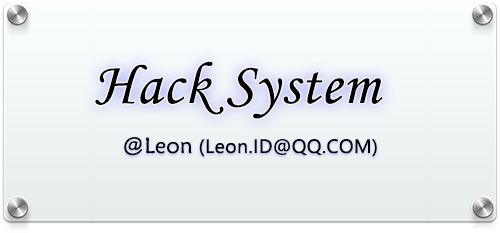
<style>
.page{position:relative;width:500px;height:233px}
.page>*{position:absolute;margin:0}
.t1{font:60px "MonotypeCorsiva";letter-spacing:0.02em;color:#000000}
.t2{font:18px "MicrosoftYaHei";letter-spacing:0.02em;color:#000000}
.t3{font:22px "STXinwei";letter-spacing:0.02em;color:#000000}
</style>
<div class="page">
<p class="t1" style="left:95px;top:61px;width:288px;height:58px">Hack System</p>
<p class="t2" style="left:124px;top:137px;width:253px;height:20px"><span class="t3">@Leon </span>(Leon.ID@QQ.COM)</p>
</div>
